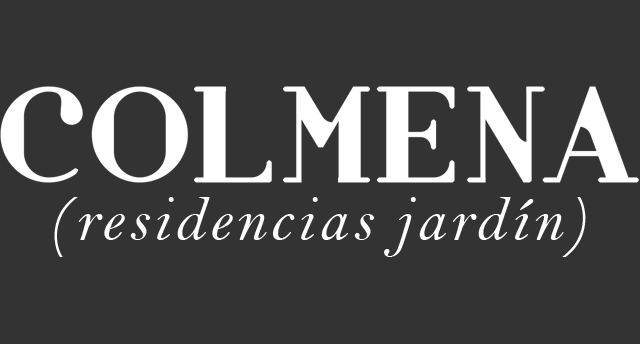
<style>
.page{position:relative;width:640px;height:344px;background:#333333}
.page>*{position:absolute;margin:0}
.t1{font:65.1px "BellMTItalic";letter-spacing:0.06em;color:#ffffff}
</style>
<div class="page">
<p class="t1" style="left:54px;top:197px;width:532px;height:60px">(residencias jardín)</p>
</div>
